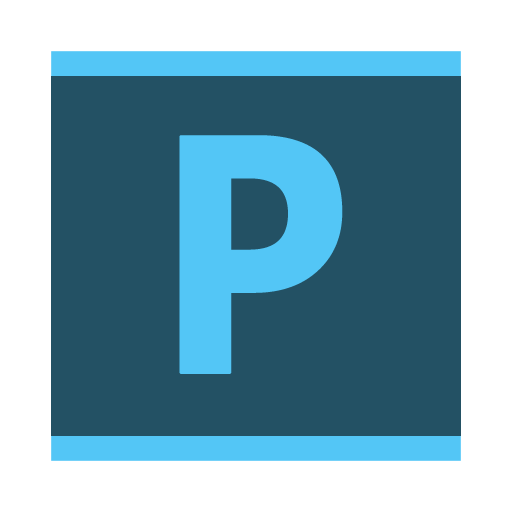
<style>
.page{position:relative;width:512px;height:512px;background:#235164}
.page>*{position:absolute;margin:0}
.t1{font:337.6px "Leelawadee-Bold";letter-spacing:-0.02em;color:#53c6f6;font-weight:bold;scale:0.93 1}
</style>
<div class="page">
<p class="t1" style="left:179px;top:135px;width:164px;height:239px">P</p>
</div>
